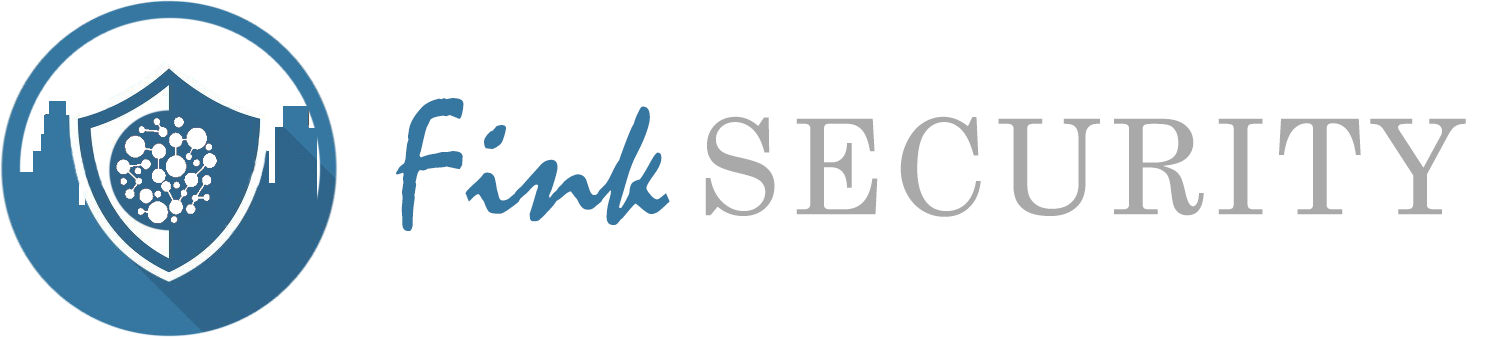
<style>
.page{position:relative;width:1512px;height:337px;background:#ffffff}
.page>*{position:absolute;margin:0}
.t1{font:132px "Century";letter-spacing:0.06em;color:#a9a9a9}
.t2{font:177px "Mistral";color:#3677a1}
.t3{font:177px "Mistral";letter-spacing:-0.18em;color:#3677a1}
</style>
<div class="page">
<p class="t1" style="left:396px;top:98px;width:1070px;height:133px"><span class="t2">Fin</span><span class="t3">k </span>SECURITY</p>
</div>
